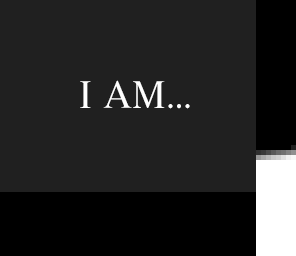
<style>
.page{position:relative;width:296px;height:256px;background:#202020}
.page>*{position:absolute;margin:0}
.t1{font:36px "MatisseVPro-DB";color:#ffffff}
.t2{font:30px "MatisseVPro-DB";letter-spacing:-0.025em;color:#ffffff}
</style>
<div class="page">
<p class="t1" style="left:80px;top:80px;width:110px;height:29px">I AM<span class="t2">...</span></p>
</div>
